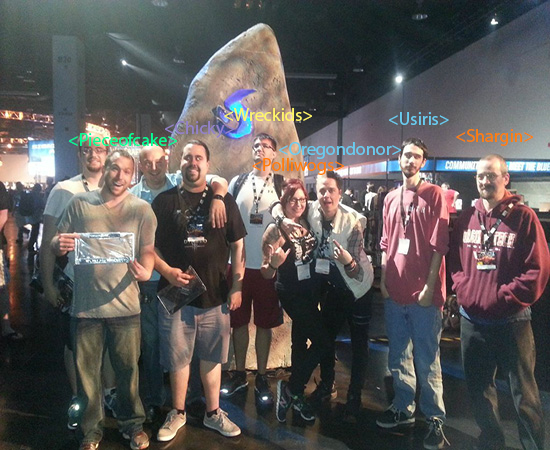
<style>
.page{position:relative;width:550px;height:450px}
.page>*{position:absolute;margin:0}
.t1{font:18px "MyriadPro-Regular";color:#fff569}
.t2{font:18px "MyriadPro-Regular";color:#69ccf0}
.t3{font:18px "MyriadPro-Regular";color:#9482c9}
.t4{font:18px "MyriadPro-Regular";color:#00ff96}
.t5{font:18px "MyriadPro-Regular";color:#ff7d0a}
</style>
<div class="page">
<p class="t1" style="left:224px;top:108px;width:88px;height:13px">&lt;Wreckids&gt;</p>
<p class="t2" style="left:389px;top:112px;width:60px;height:13px">&lt;Usiris&gt;</p>
<p class="t3" style="left:165px;top:121px;width:69px;height:17px">&lt;Chicky&gt;</p>
<p class="t4" style="left:69px;top:133px;width:108px;height:13px">&lt;Pieceofcake&gt;</p>
<p class="t5" style="left:456px;top:129px;width:77px;height:17px">&lt;Shargin&gt;</p>
<p class="t2" style="left:279px;top:142px;width:122px;height:17px">&lt;Oregondonor&gt;</p>
<p class="t5" style="left:252px;top:158px;width:92px;height:17px">&lt;Polliwogs&gt;</p>
</div>
